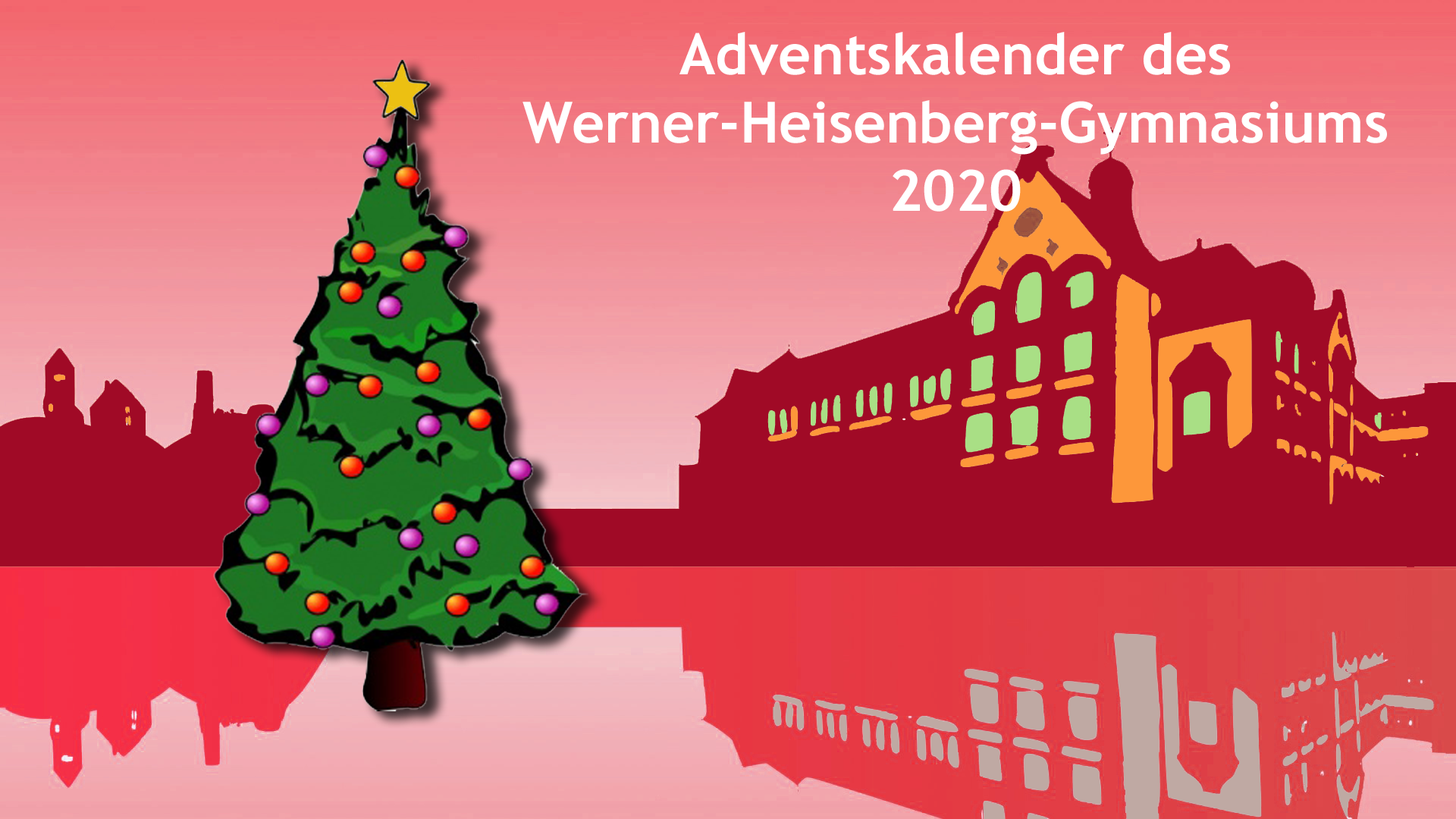
<style>
.page{position:relative;width:1456px;height:819px}
.page>*{position:absolute;margin:0}
.t1{font:56.9px "TrebuchetMS-Bold";color:#ffffff}
</style>
<div class="page">
<p class="t1" style="left:522px;top:32px;width:865px;height:180px;text-align:center">Adventskalender des<br>Werner-Heisenberg-Gymnasiums<br>2020</p>
</div>
